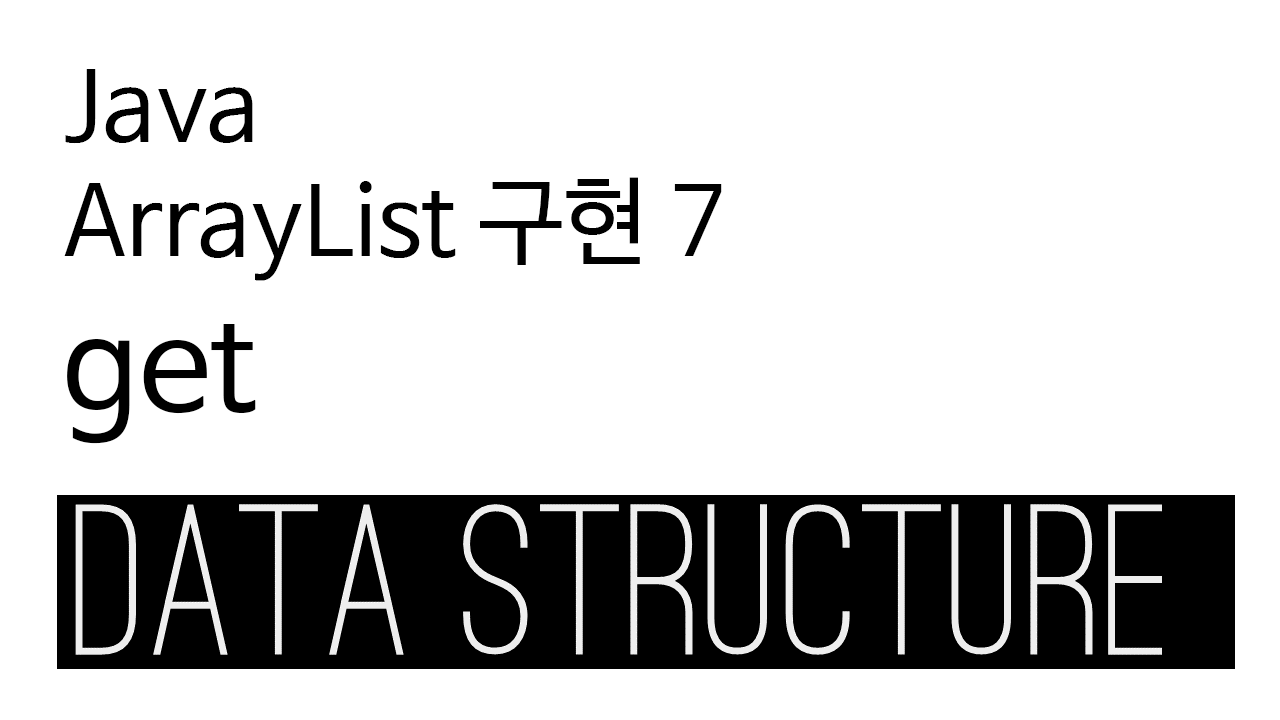
<style>
.page{position:relative;width:1280px;height:720px;background:#ffffff}
.page>*{position:absolute;margin:0}
.t1{font:96px "NanumBarunGothic";color:#000000}
.t2{font:128px "NanumBarunGothic";color:#000000}
</style>
<div class="page">
<p class="t1" style="left:64px;top:69px;width:658px;height:375px">Java<br>ArrayList 구현 7<br><span class="t2">get</span></p>
</div>
